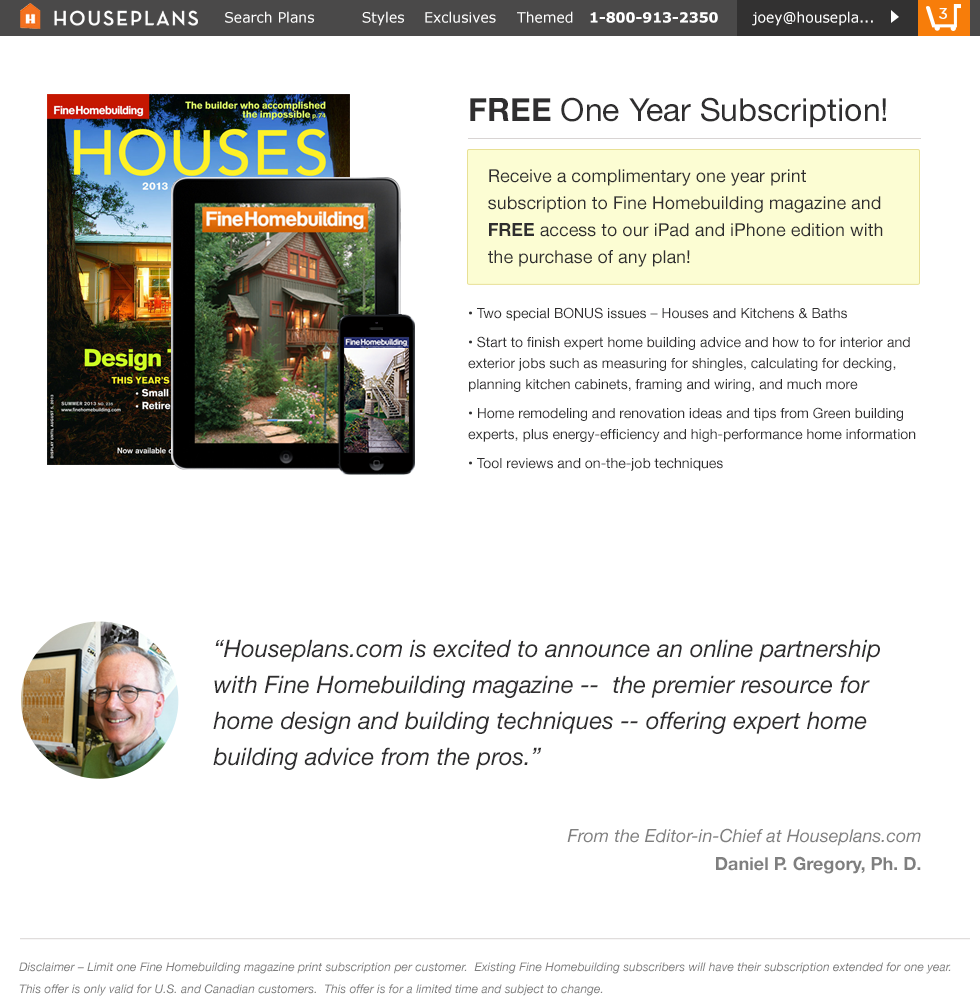
<style>
.page{position:relative;width:980px;height:1007px;background:#ffffff}
.page>*{position:absolute;margin:0}
.t1{font:13.9px "Verdana";color:#ffffff}
.t2{font:13.9px "Verdana-Bold";color:#ffffff}
.t3{font:14px "Verdana";color:#ffffff}
.t4{font:15.1px "GothamRounded-Book";color:#fcfbfc;font-weight:bold}
.t5{font:32px "HelveticaNeue";color:#2f2e2f}
.t6{font:32px "HelveticaNeue-Bold";color:#2f2e2f}
.t7{font:18px/27px "HelveticaNeue";color:#2f2e2f}
.t8{font:18px/27px "HelveticaNeue-Bold";color:#2f2e2f}
.t9{font:14px/21px "HelveticaNeue";color:#2f2e2f}
.t10{font:24px/36px "HelveticaNeue-Italic";color:#2f2e2f}
.t11{font:18px/28px "HelveticaNeue-Italic";color:#7f7f7f}
.t12{font:18px/28px "HelveticaNeue-Bold";color:#7f7f7f}
.t13{font:12px/22px "HelveticaNeue-Italic";color:#7f7f7f}
</style>
<div class="page">
<p class="t1" style="left:225px;top:11px;width:493px;height:15px">Search Plans        Styles    Exclusives   Themed    <span class="t2">1-800-913-2350</span></p>
<p class="t3" style="left:752px;top:11px;width:121px;height:15px">joey@housepla...</p>
<p class="t4" style="left:939px;top:8px;width:8px;height:11px">3</p>
<p class="t5" style="left:470px;top:97px;width:416px;height:31px"><span class="t6">FREE</span> One Year Subscription!</p>
<p class="t7" style="left:488px;top:169px;width:395px;height:98px">Receive a complimentary one year print subscription to Fine Homebuilding magazine and <span class="t8">FREE</span> access to our iPad and iPhone edition with the purchase of any plan!</p>
<p class="t9" style="left:468px;top:307px;width:448px;height:164px">• Two special BONUS issues – Houses and Kitchens &amp; Baths<br>• Start to finish expert home building advice and how to for interior and exterior jobs such as measuring for shingles, calculating for decking, planning kitchen cabinets, framing and wiring, and much more<br>• Home remodeling and renovation ideas and tips from Green building experts, plus energy-efficiency and high-performance home information<br>• Tool reviews and on-the-job techniques</p>
<p class="t10" style="left:213px;top:639px;width:667px;height:131px">“Houseplans.com is excited to announce an online partnership with Fine Homebuilding magazine --  the premier resource for home design and building techniques -- offering expert home building advice from the pros.”</p>
<p class="t11" style="left:567px;top:828px;width:354px;height:46px;text-align:right">From the Editor-in-Chief at Houseplans.com<br><span class="t12">Daniel P. Gregory, Ph. D.</span></p>
<p class="t13" style="left:19px;top:962px;width:932px;height:34px">Disclaimer – Limit one Fine Homebuilding magazine print subscription per customer.  Existing Fine Homebuilding subscribers will have their subscription extended for one year.  This offer is only valid for U.S. and Canadian customers.  This offer is for a limited time and subject to change.</p>
</div>
